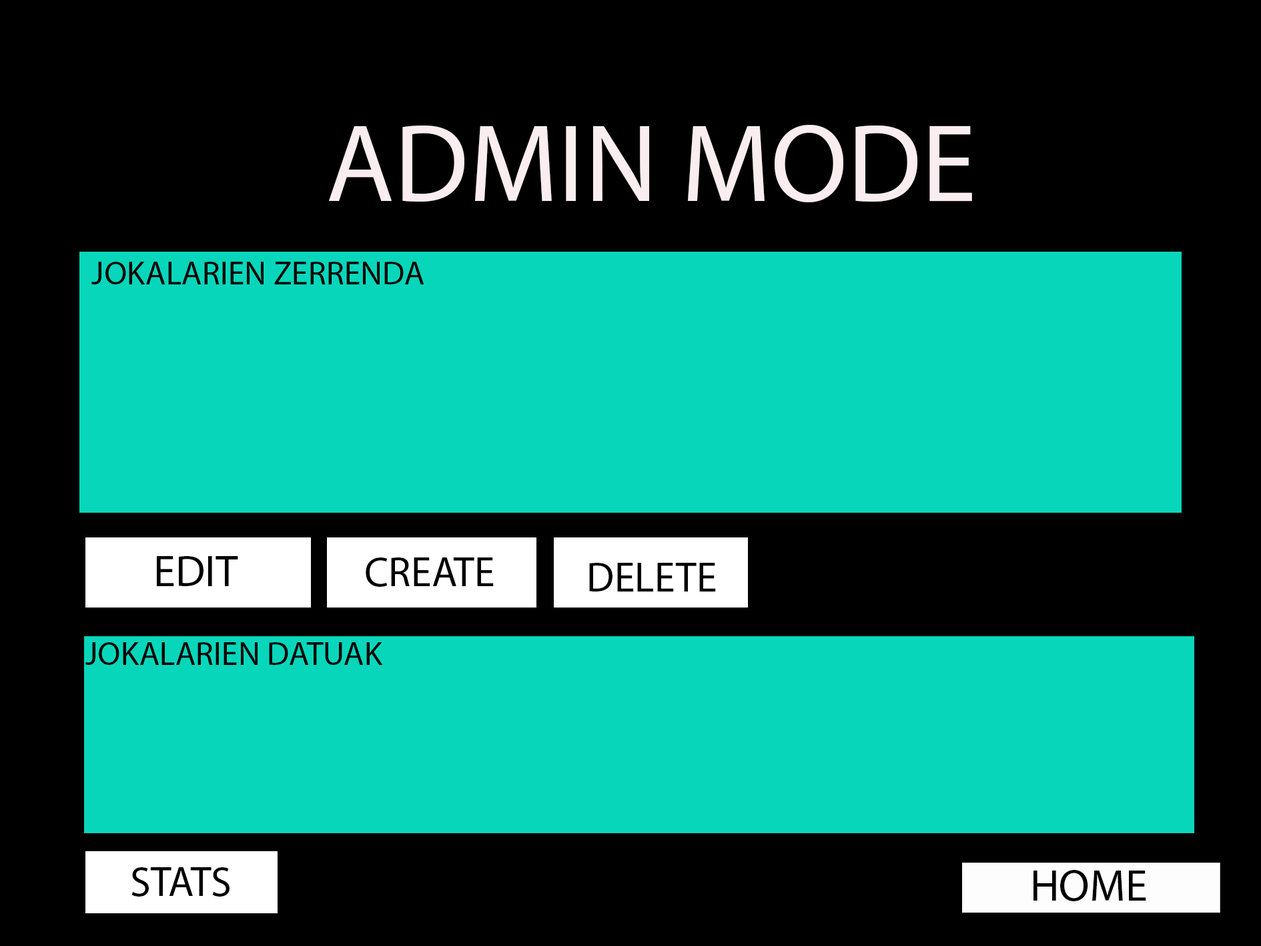
<style>
.page{position:relative;width:1261px;height:946px;background:#000000}
.page>*{position:absolute;margin:0}
.t1{font:111.2px "MyriadPro-Regular";color:#f9edef}
.t2{font:33.4px "MyriadPro-Regular";color:#000000}
.t3{font:44.5px "MyriadPro-Regular";color:#000000}
.t4{font:41.7px "MyriadPro-Regular";color:#000000}
</style>
<div class="page">
<p class="t1" style="left:329px;top:125px;width:643px;height:77px">ADMIN MODE</p>
<p class="t2" style="left:91px;top:262px;width:333px;height:22px">JOKALARIEN ZERRENDA</p>
<p class="t3" style="left:157px;top:556px;width:81px;height:30px">EDIT</p>
<p class="t4" style="left:366px;top:557px;width:128px;height:30px">CREATE</p>
<p class="t4" style="left:589px;top:563px;width:127px;height:28px">DELETE</p>
<p class="t2" style="left:85px;top:642px;width:298px;height:23px">JOKALARIEN DATUAK</p>
<p class="t4" style="left:131px;top:867px;width:99px;height:29px">STATS</p>
<p class="t3" style="left:1034px;top:869px;width:112px;height:32px">HOME</p>
</div>
